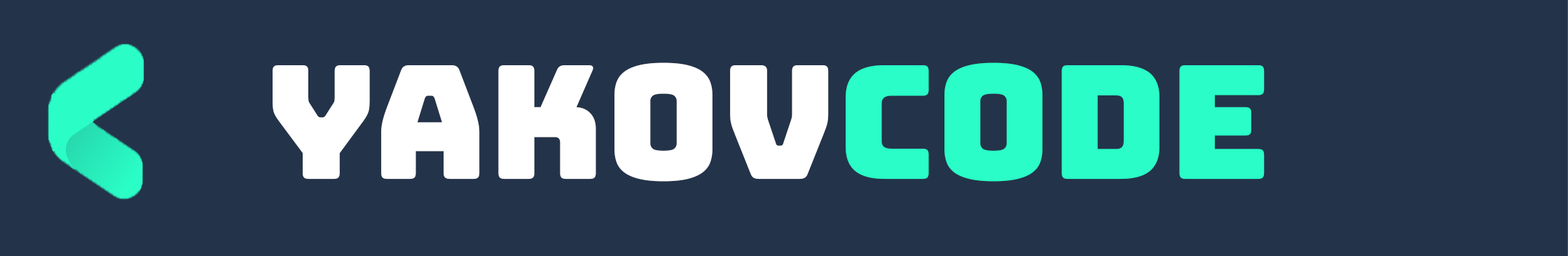
<style>
.page{position:relative;width:1568px;height:256px;background:#23334a}
.page>*{position:absolute;margin:0}
.t1{font:157.6px "Bungee-Regular";color:#ffffff}
.t2{font:157.6px "Bungee-Regular";color:#2afdc7}
</style>
<div class="page">
<p class="t1" style="left:273px;top:62px;width:992px;height:119px">Yakov<span class="t2">code</span></p>
</div>
